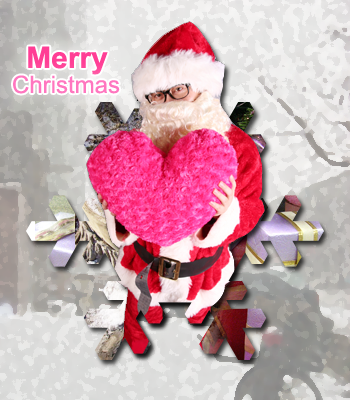
<style>
.page{position:relative;width:350px;height:400px}
.page>*{position:absolute;margin:0}
.t1{font:30px "Arial-BoldMT";color:#ff3e95}
.t2{font:24px "ArialMT";color:#ff77bf}
</style>
<div class="page">
<p class="t1" style="left:28px;top:46px;width:80px;height:29px">Merry</p>
<p class="t2" style="left:13px;top:75px;width:107px;height:19px">Christmas</p>
</div>
